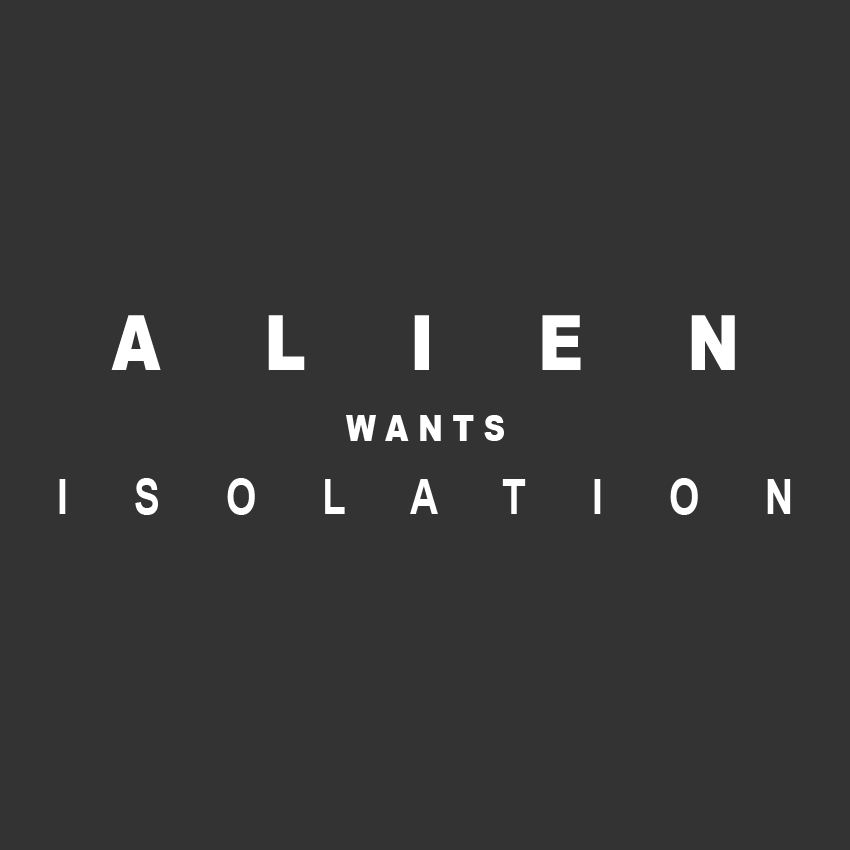
<style>
.page{position:relative;width:850px;height:850px;background:#333333}
.page>*{position:absolute;margin:0}
.t1{font:76px "Arial-Black";color:#ffffff;text-transform:uppercase;scale:0.82 1}
.t2{font:36px "Arial-Black";color:#ffffff;text-transform:uppercase;scale:0.82 1}
.t3{font:48px "Arial-BoldMT";color:#ffffff;text-transform:uppercase;scale:0.82 1}
</style>
<div class="page">
<p class="t1" style="left:111px;top:315px;width:624px;height:55px">A     l     i     e     n</p>
<p class="t2" style="left:346px;top:415px;width:158px;height:26px">w a n t s</p>
<p class="t3" style="left:59px;top:478px;width:732px;height:37px">I      S      O      L      A      T      I      O      N</p>
</div>
